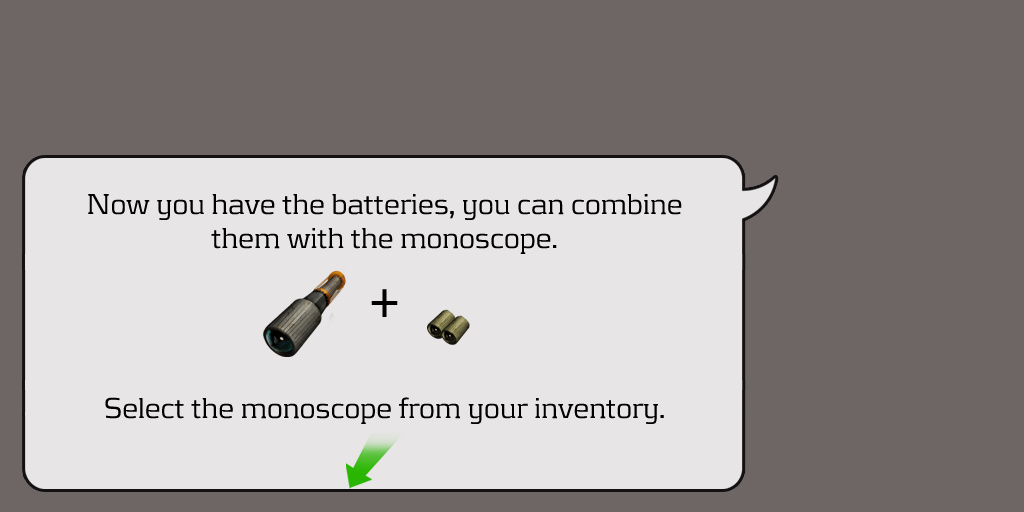
<style>
.page{position:relative;width:1024px;height:512px;background:#6e6665}
.page>*{position:absolute;margin:0}
.t1{font:30px/34px "KontrapunktLight";color:#000000}
.t2{font:60px/34px "KontrapunktLight";color:#000000}
</style>
<div class="page">
<p class="t1" style="left:88px;top:194px;width:594px;height:230px;text-align:center">Now you have the batteries, you can combine <br>them with the monoscope. <br><br><span class="t2">+<br></span><br><br>Select the monoscope from your inventory.</p>
</div>
